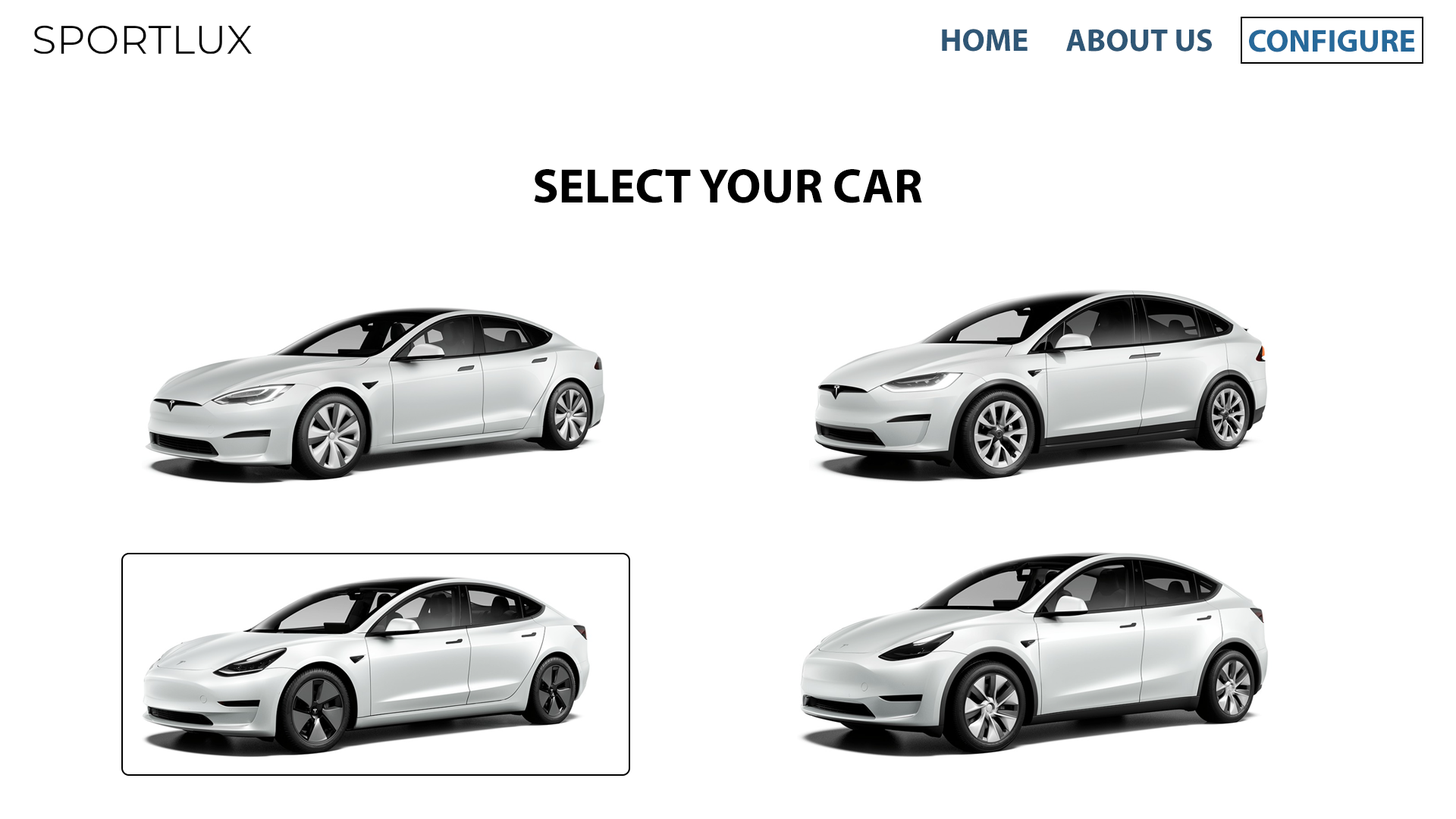
<style>
.page{position:relative;width:1456px;height:819px;background:#ffffff}
.page>*{position:absolute;margin:0}
.t1{font:31.8px "MyriadPro-Bold";color:#305776}
.t2{font:31.8px "MyriadPro-Bold";color:#27699a}
.t3{font:48.5px "MyriadPro-Bold";color:#000000}
</style>
<div class="page">
<p class="t1" style="left:942px;top:29px;width:86px;height:23px">HOME</p>
<p class="t1" style="left:1066px;top:29px;width:146px;height:23px">ABOUT US</p>
<p class="t2" style="left:1249px;top:30px;width:166px;height:22px">CONFIGURE</p>
<p class="t3" style="left:534px;top:169px;width:388px;height:34px">SELECT YOUR CAR</p>
</div>
